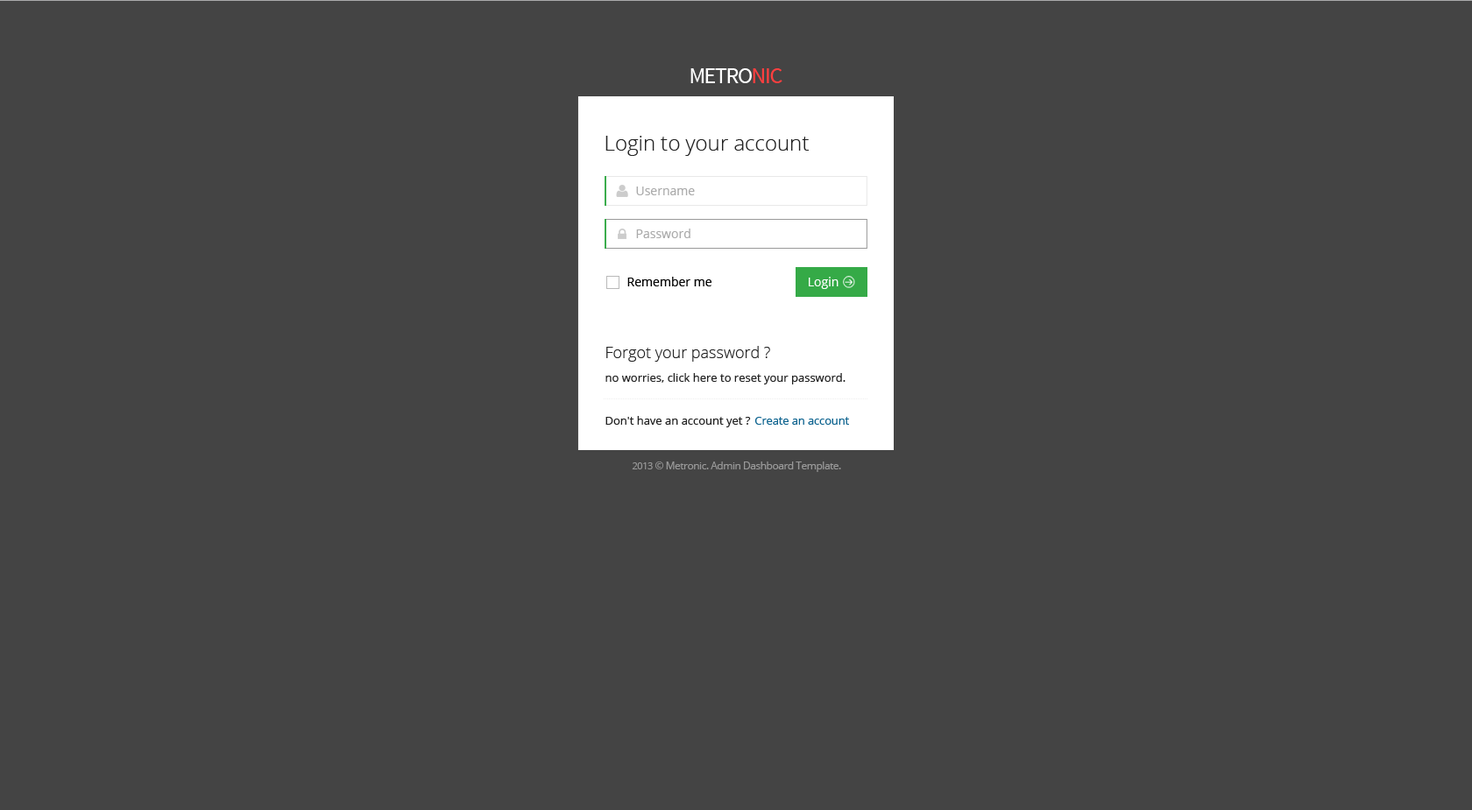
<style>
.page{position:relative;width:1472px;height:810px;background:#444444}
.page>*{position:absolute;margin:0}
.t1{font:22.4px "SourceSansPro-Regular";letter-spacing:-0.045em;color:#ffffff;text-transform:uppercase}
.t2{font:22.4px "SourceSansPro-Regular";letter-spacing:-0.045em;color:#ff3f3f;text-transform:uppercase}
.t3{font:21px "OpenSans-Light";color:#222222}
.t4{font:12.3px "OpenSans";color:#ababab}
.t5{font:12.3px "OpenSans";color:#000000}
.t6{font:12.3px "OpenSans";color:#ffffff}
.t7{font:11.4px/8.6px "OpenSans";color:#222222}
.t8{font:15.8px "OpenSans-Light";color:#222222}
.t9{font:11.4px "OpenSans";color:#222222}
.t10{font:11.4px "OpenSans";letter-spacing:-0.01em;color:#0d638f}
.t11{font:10.5px "OpenSans";letter-spacing:-0.04em;color:#999999}
.t12{font:9.6px "OpenSans";letter-spacing:-0.04em;color:#999999}
</style>
<div class="page">
<p class="t1" style="left:690px;top:68px;width:92px;height:15px">Metro<span class="t2">nic</span></p>
<p class="t3" style="left:605px;top:136px;width:204px;height:20px">Login to your account</p>
<p class="t4" style="left:636px;top:187px;width:59px;height:8px">Username</p>
<p class="t4" style="left:636px;top:229px;width:54px;height:9px">Password</p>
<p class="t5" style="left:627px;top:277px;width:84px;height:9px">Remember me</p>
<p class="t6" style="left:809px;top:277px;width:29px;height:12px">Login</p>
<p class="t7" style="left:605px;top:346px;width:240px;height:39px"><span class="t8">Forgot your password ?<br><br></span>no worries, click here to reset your password.</p>
<p class="t9" style="left:605px;top:416px;width:244px;height:11px">Don't have an account yet ?  <span class="t10">Create an account</span></p>
<p class="t11" style="left:632px;top:462px;width:209px;height:10px"><span class="t12">2013</span> © Metronic. Admin Dashboard Template.</p>
</div>
